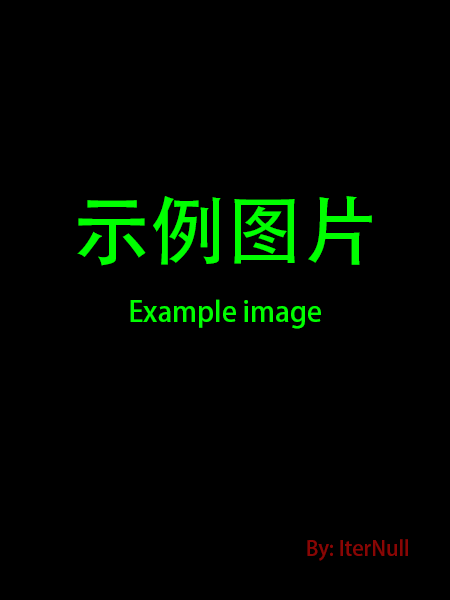
<style>
.page{position:relative;width:450px;height:600px;background:#000000}
.page>*{position:absolute;margin:0}
.t1{font:76.4px "AdobeHeitiStd-Regular";color:#00ff00}
.t2{font:27.8px "AdobeHeitiStd-Regular";color:#00ff00}
.t3{font:20.8px "AdobeHeitiStd-Regular";color:#890604}
</style>
<div class="page">
<p class="t1" style="left:77px;top:196px;width:295px;height:70px">示例图片</p>
<p class="t2" style="left:130px;top:299px;width:191px;height:30px">Example image</p>
<p class="t3" style="left:307px;top:539px;width:101px;height:22px">By: IterNull</p>
</div>
